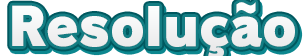
<style>
.page{position:relative;width:308px;height:56px;background:#ffffff}
.page>*{position:absolute;margin:0}
.t1{font:51.7px "RodinPro-UB";color:#f2f2f3}
</style>
<div class="page">
<p class="t1" style="left:12px;top:2px;width:283px;height:56px">Resolução</p>
</div>
